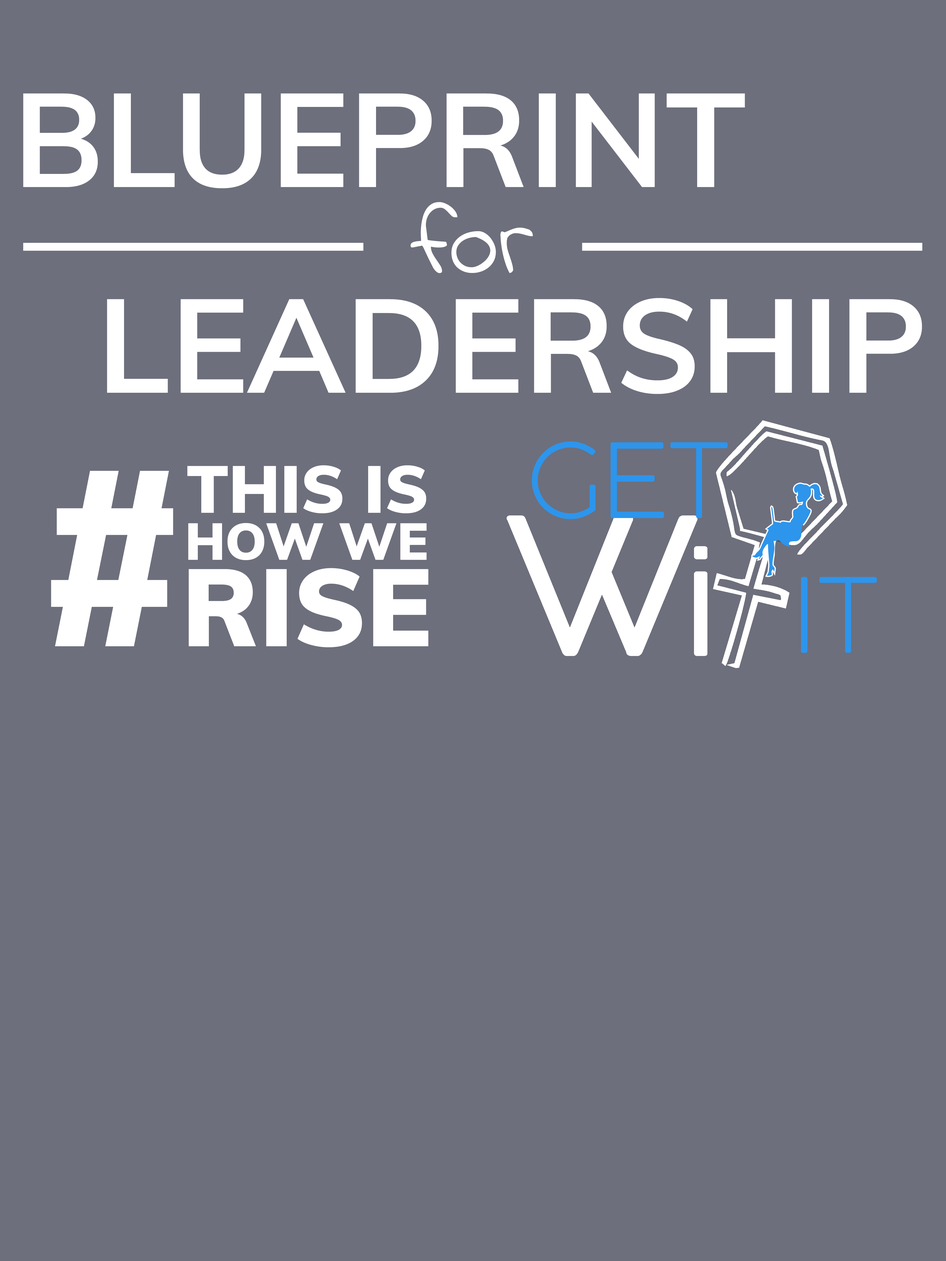
<style>
.page{position:relative;width:946px;height:1261px;background:#6d6f7c}
.page>*{position:absolute;margin:0}
.t1{font:131.3px "Muli-Bold";color:#ffffff}
.t2{font:100.7px "IndieFlower";color:#ffffff}
.t3{font:246.3px "Muli-Black";color:#ffffff}
.t4{font:65.7px "Muli-Black";color:#ffffff}
.t5{font:51.4px "Muli-Black";color:#fffefe}
.t6{font:108.4px "Muli-Black";color:#ffffff}
</style>
<div class="page">
<p class="t1" style="left:23px;top:93px;width:722px;height:95px">BLUEPRINT</p>
<p class="t2" style="left:410px;top:202px;width:123px;height:71px">for</p>
<p class="t1" style="left:107px;top:298px;width:815px;height:96px">LEADERSHIP</p>
<p class="t3" style="left:51px;top:471px;width:122px;height:175px">#</p>
<p class="t4" style="left:187px;top:465px;width:239px;height:48px">THIS IS</p>
<p class="t5" style="left:188px;top:523px;width:239px;height:37px">HOW WE</p>
<p class="t6" style="left:189px;top:568px;width:239px;height:79px">RISE</p>
</div>
